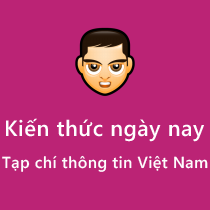
<style>
.page{position:relative;width:210px;height:210px;background:#bb2375}
.page>*{position:absolute;margin:0}
.t1{font:22px "SegoeWP-Semibold";letter-spacing:0.025em;color:#ffffff}
.t2{font:16px "SegoeWP-Semibold";letter-spacing:0.025em;color:#fefefe}
</style>
<div class="page">
<p class="t1" style="left:6px;top:118px;width:198px;height:24px">Kiến thức ngày nay</p>
<p class="t2" style="left:2px;top:155px;width:206px;height:17px">Tạp chí thông tin Việt Nam</p>
</div>
